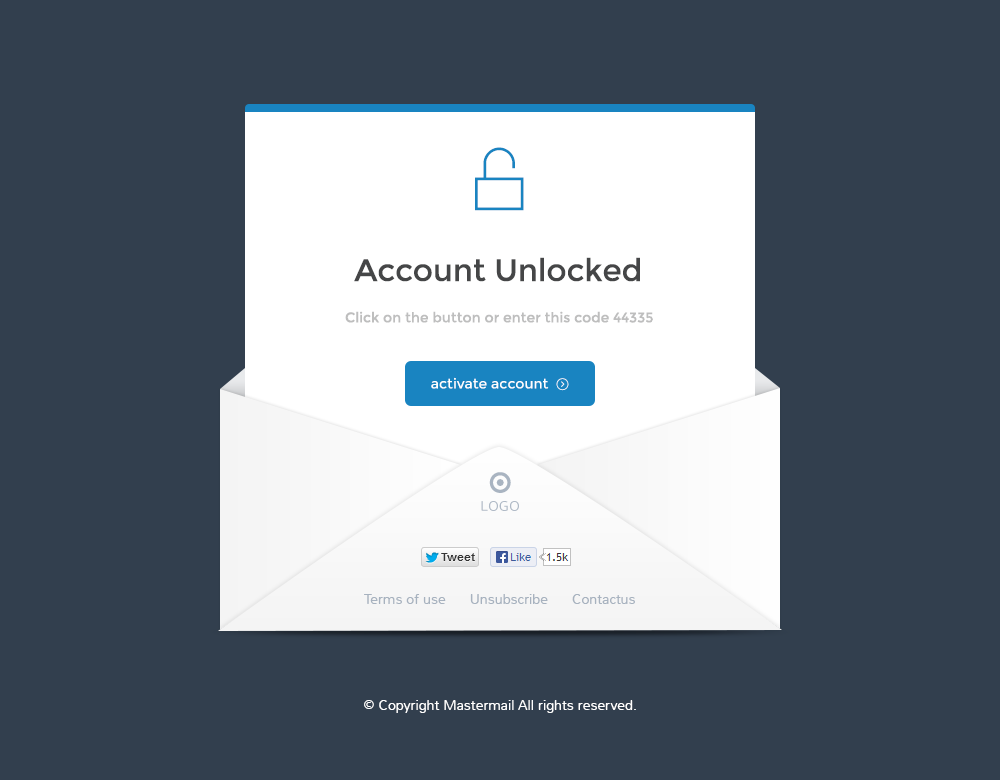
<style>
.page{position:relative;width:1000px;height:780px;background:#323f4e}
.page>*{position:absolute;margin:0}
.t1{font:31px "Montserrat-Regular";color:#454647}
.t2{font:14px "Montserrat-Regular";color:#bebebe}
.t3{font:14px "Montserrat-Regular";color:#ffffff}
.t4{font:14px "Nunito-Light";color:#b0bac6;text-transform:uppercase}
.t5{font:14px "Nunito-Light";color:#a7b2bf}
.t6{font:14px "Nunito-Light";color:#ffffff}
</style>
<div class="page">
<p class="t1" style="left:354px;top:257px;width:286px;height:25px">Account Unlocked</p>
<p class="t2" style="left:345px;top:311px;width:308px;height:12px">Click on the button or enter this code 44335</p>
<p class="t3" style="left:431px;top:377px;width:118px;height:12px">activate account</p>
<p class="t4" style="left:481px;top:501px;width:38px;height:10px">Logo</p>
<p class="t5" style="left:364px;top:594px;width:271px;height:10px">Terms of use      Unsubscribe      Contactus</p>
<p class="t6" style="left:364px;top:700px;width:272px;height:13px">© Copyright Mastermail All rights reserved.</p>
</div>
